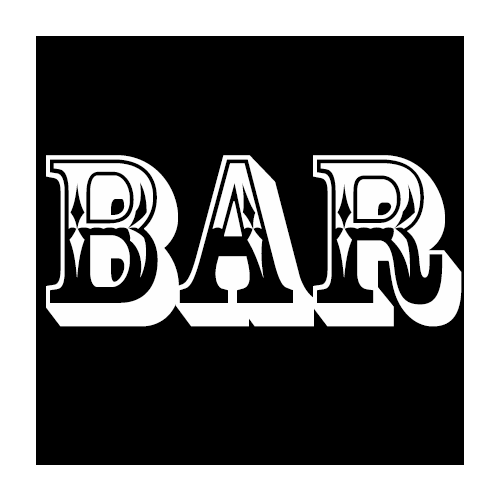
<style>
.page{position:relative;width:500px;height:500px;background:#000000}
.page>*{position:absolute;margin:0}
.t1{font:227.9px "RosewoodStd-Regular";color:#fefefe}
</style>
<div class="page">
<p class="t1" style="left:46px;top:155px;width:416px;height:172px">BAR</p>
</div>
